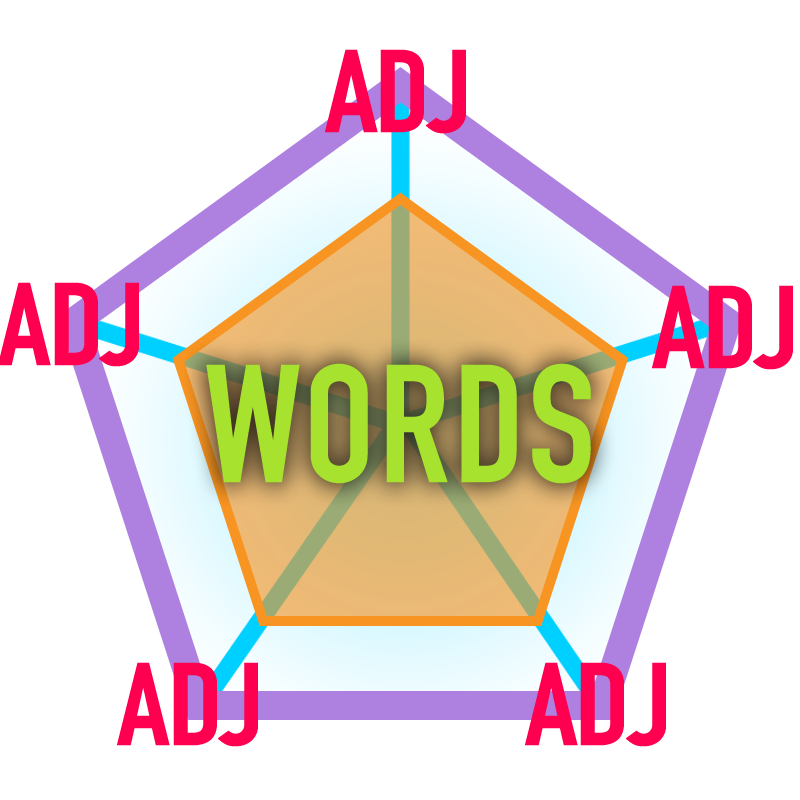
<style>
.page{position:relative;width:800px;height:800px;background:#ffffff}
.page>*{position:absolute;margin:0}
.t1{font:114.7px "DINEngschriftStd";letter-spacing:-0.04em;color:#ff0050;text-transform:uppercase;font-weight:bold;scale:1.12 1}
.t2{font:164.9px "DINEngschriftStd";color:#a6e22e;text-transform:uppercase;font-weight:bold}
</style>
<div class="page">
<p class="t1" style="left:325px;top:49px;width:141px;height:85px">ADJ</p>
<p class="t1" style="left:0px;top:282px;width:139px;height:85px">ADJ</p>
<p class="t1" style="left:652px;top:285px;width:141px;height:85px">ADJ</p>
<p class="t2" style="left:206px;top:363px;width:385px;height:121px">WORDS</p>
<p class="t1" style="left:117px;top:662px;width:141px;height:85px">ADJ</p>
<p class="t1" style="left:525px;top:662px;width:141px;height:85px">ADJ</p>
</div>
